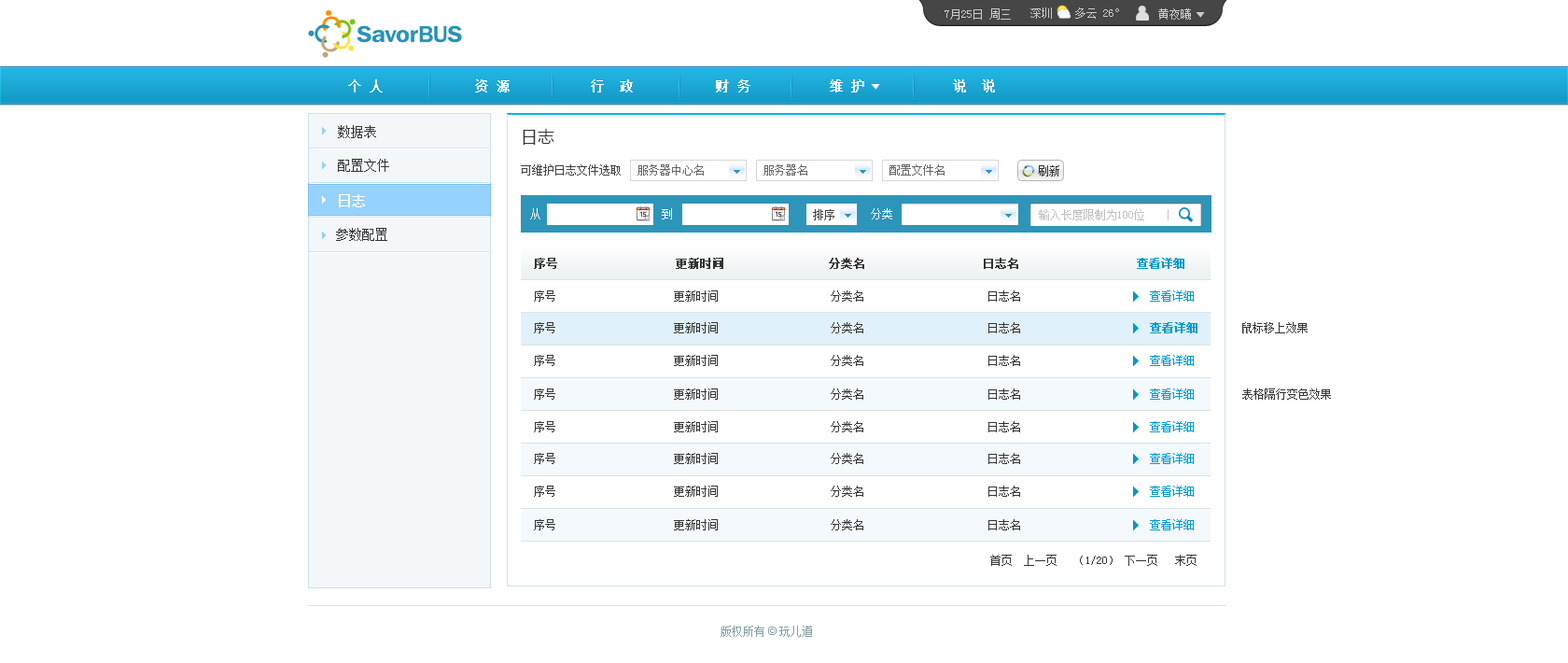
<style>
.page{position:relative;width:1568px;height:663px;background:#ffffff}
.page>*{position:absolute;margin:0}
.t1{font:11.2px "SimSun";color:#cccccc}
.t2{font:13.1px "SimSun";color:#ffffff;font-weight:bold}
.t3{font:13.1px "SimSun";color:#333333}
.t4{font:16.8px "MicrosoftYaHei";color:#333333}
.t5{font:11.2px "SimSun";color:#424142}
.t6{font:11.2px "SimSun";color:#666666}
.t7{font:11.2px "SimSun";color:#333333}
.t8{font:11.2px "SimSun";color:#ffffff}
.t9{font:11.2px "SimSun";color:#bfbfbf}
.t10{font:11.2px "SimSun";color:#333333;font-weight:bold}
.t11{font:11.2px "SimSun";color:#0099cc;font-weight:bold}
.t12{font:11.2px "SimSun";color:#0099cc}
.t13{font:11.2px "SimSun";color:#849fa6}
.t14{font:11.2px "ArialMT";color:#849fa6}
</style>
<div class="page">
<p class="t1" style="left:945px;top:8px;width:66px;height:12px">7月25日 周三</p>
<p class="t1" style="left:1030px;top:7px;width:89px;height:12px">深圳    多云 26°</p>
<p class="t1" style="left:1158px;top:8px;width:33px;height:12px">黄夜曦</p>
<p class="t2" style="left:348px;top:79px;width:647px;height:13px">个 人         资 源           行  政           财 务       维 护          说  说</p>
<p class="t3" style="left:338px;top:125px;width:38px;height:13px">数据表</p>
<p class="t4" style="left:523px;top:129px;width:31px;height:16px">日志</p>
<p class="t3" style="left:338px;top:159px;width:51px;height:13px">配置文件</p>
<p class="t5" style="left:521px;top:164px;width:100px;height:11px">可维护日志文件选取</p>
<p class="t6" style="left:637px;top:164px;width:67px;height:11px">服务器中心名</p>
<p class="t6" style="left:763px;top:164px;width:44px;height:11px">服务器名</p>
<p class="t6" style="left:889px;top:164px;width:56px;height:11px">配置文件名</p>
<p class="t7" style="left:1038px;top:165px;width:21px;height:11px">刷新</p>
<p class="t2" style="left:339px;top:194px;width:26px;height:13px">日志</p>
<p class="t8" style="left:530px;top:208px;width:10px;height:11px">从</p>
<p class="t8" style="left:662px;top:208px;width:10px;height:11px">到</p>
<p class="t5" style="left:813px;top:209px;width:21px;height:11px">排序</p>
<p class="t8" style="left:871px;top:208px;width:21px;height:11px">分类</p>
<p class="t9" style="left:1039px;top:209px;width:105px;height:11px">输入长度限制为100位</p>
<p class="t3" style="left:336px;top:228px;width:51px;height:13px">参数配置</p>
<p class="t10" style="left:534px;top:258px;width:650px;height:11px">序号                  更新时间                分类名                  日志名                  <span class="t11">查看详细</span></p>
<p class="t7" style="left:534px;top:290px;width:660px;height:11px">序号                     更新时间                    分类名                      日志名                       <span class="t12">查看详细</span></p>
<p class="t7" style="left:534px;top:322px;width:663px;height:11px">序号                     更新时间                    分类名                      日志名                       <span class="t11">查看详细</span></p>
<p class="t7" style="left:1242px;top:322px;width:66px;height:11px">鼠标移上效果</p>
<p class="t7" style="left:534px;top:355px;width:660px;height:11px">序号                     更新时间                    分类名                      日志名                       <span class="t12">查看详细</span></p>
<p class="t7" style="left:534px;top:388px;width:660px;height:11px">序号                     更新时间                    分类名                      日志名                       <span class="t12">查看详细</span></p>
<p class="t7" style="left:1242px;top:388px;width:89px;height:11px">表格隔行变色效果</p>
<p class="t7" style="left:534px;top:421px;width:660px;height:11px">序号                     更新时间                    分类名                      日志名                       <span class="t12">查看详细</span></p>
<p class="t7" style="left:534px;top:453px;width:660px;height:11px">序号                     更新时间                    分类名                      日志名                       <span class="t12">查看详细</span></p>
<p class="t7" style="left:534px;top:485px;width:660px;height:12px">序号                     更新时间                    分类名                      日志名                       <span class="t12">查看详细</span></p>
<p class="t7" style="left:534px;top:519px;width:660px;height:11px">序号                     更新时间                    分类名                      日志名                       <span class="t12">查看详细</span></p>
<p class="t7" style="left:990px;top:554px;width:207px;height:12px">首页  上一页   （1/20） 下一页   末页</p>
<p class="t13" style="left:721px;top:625px;width:91px;height:12px">版权所有<span class="t14"> © </span>玩儿道</p>
</div>
